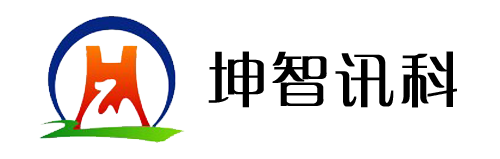
<style>
.page{position:relative;width:500px;height:159px;background:#ffffff}
.page>*{position:absolute;margin:0}
.t1{font:59.2px "FZZQK--GBK1-0";letter-spacing:0.05em;color:#000000;font-weight:bold}
</style>
<div class="page">
<p class="t1" style="left:208px;top:51px;width:249px;height:57px">坤智讯科</p>
</div>
